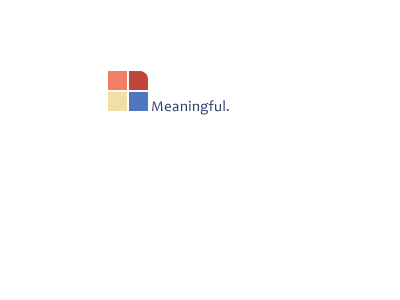
<style>
.page{position:relative;width:400px;height:300px;background:#ffffff}
.page>*{position:absolute;margin:0}
.t1{font:15px "Candara";letter-spacing:0.02em;color:#344373}
</style>
<div class="page">
<p class="t1" style="left:152px;top:100px;width:77px;height:15px">Meaningful.</p>
</div>
